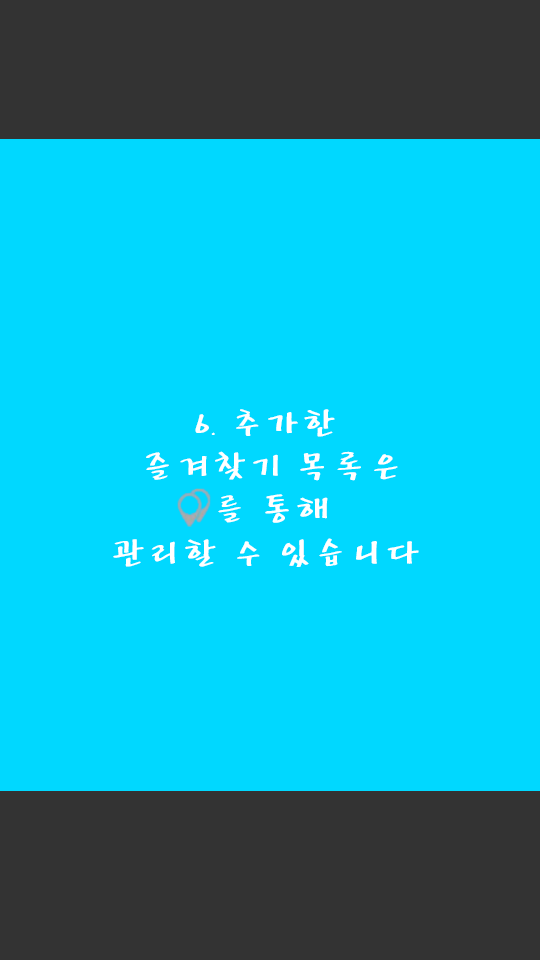
<style>
.page{position:relative;width:540px;height:960px;background:#00d8ff}
.page>*{position:absolute;margin:0}
.t1{font:36px "HYbdaM";color:#ffffff}
</style>
<div class="page">
<p class="t1" style="left:113px;top:409px;width:306px;height:158px;text-align:center">6. 추가한 <br>즐겨찾기 목록은<br>를 통해<br>관리할 수 있습니다</p>
</div>
